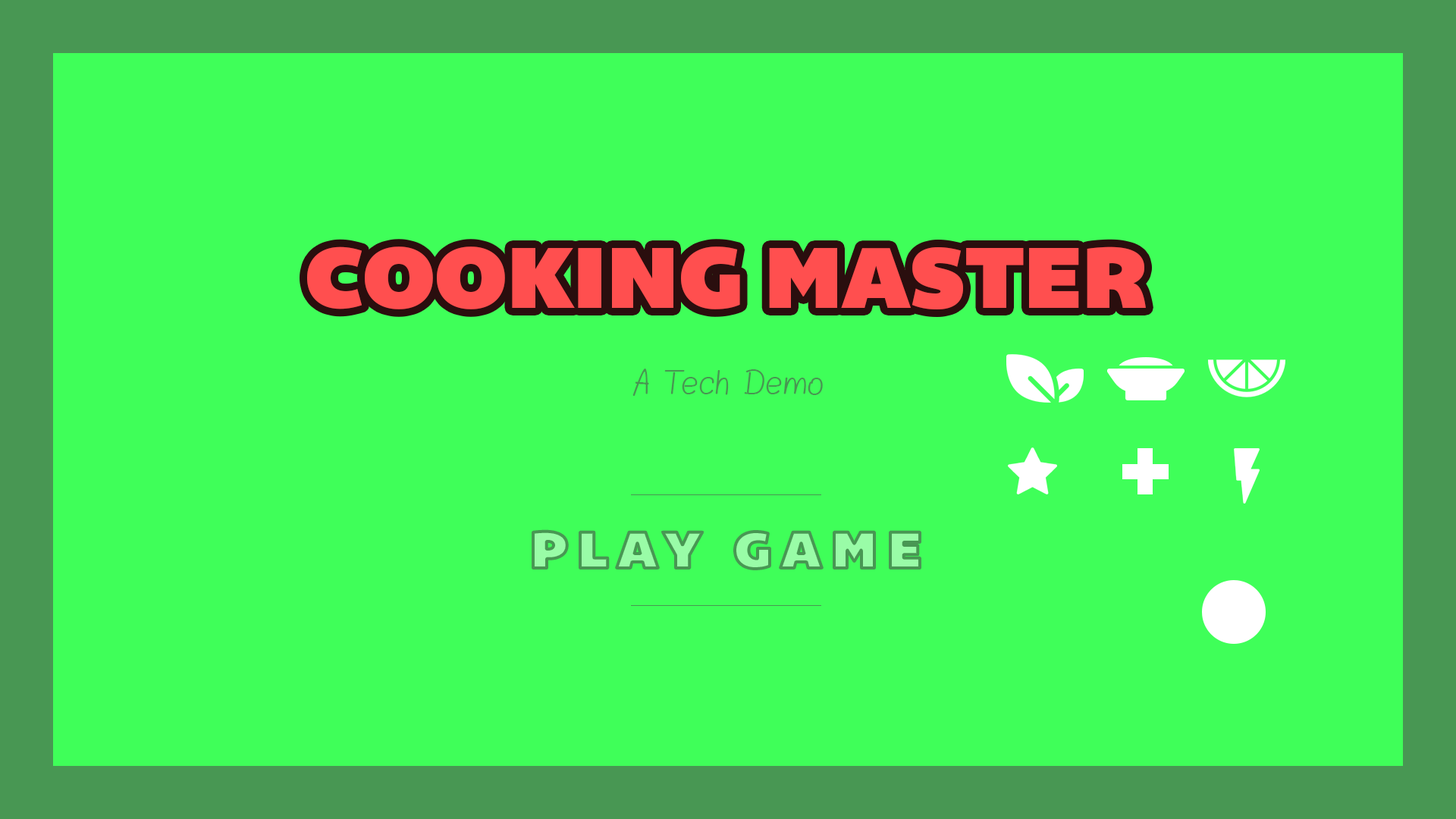
<style>
.page{position:relative;width:1456px;height:819px;background:#3fff59}
.page>*{position:absolute;margin:0}
.t1{font:88.5px "Bemio";color:#ff4f4f}
.t2{font:26.5px "Blokletters-Balpen";color:#489652}
.t3{font:53.1px "Bemio";letter-spacing:0.18em;color:#99fca7}
</style>
<div class="page">
<p class="t1" style="left:307px;top:246px;width:839px;height:63px">COOKING MASTER</p>
<p class="t2" style="left:632px;top:369px;width:191px;height:27px">A Tech Demo</p>
<p class="t3" style="left:533px;top:531px;width:387px;height:38px">PLAY GAME</p>
</div>
